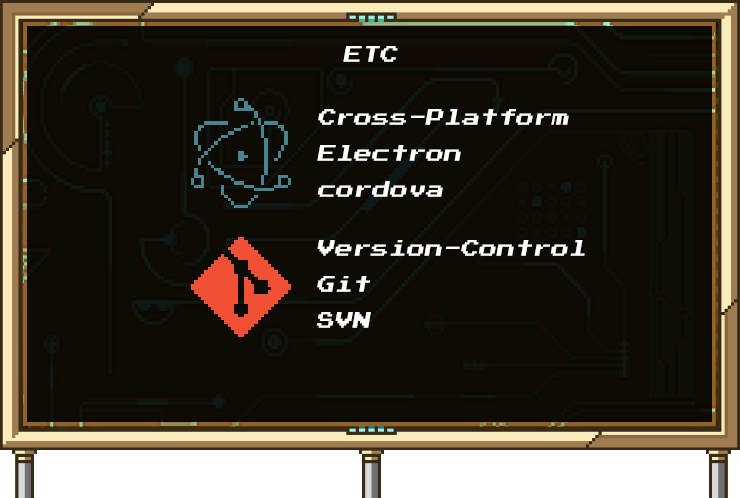
<style>
.page{position:relative;width:740px;height:498px;background:#0e0a04}
.page>*{position:absolute;margin:0}
.t1{font:18px "PressStart2P";color:#ffffff;font-style:italic}
.t2{font:18px/36px "PressStart2P";color:#ffffff;font-style:italic}
</style>
<div class="page">
<p class="t1" style="left:343px;top:46px;width:55px;height:16px">ETC</p>
<p class="t2" style="left:317px;top:109px;width:252px;height:88px">Cross-Platform<br>Electron<br>cordova</p>
<p class="t2" style="left:316px;top:240px;width:269px;height:88px">Version-Control<br>Git<br>SVN</p>
</div>
